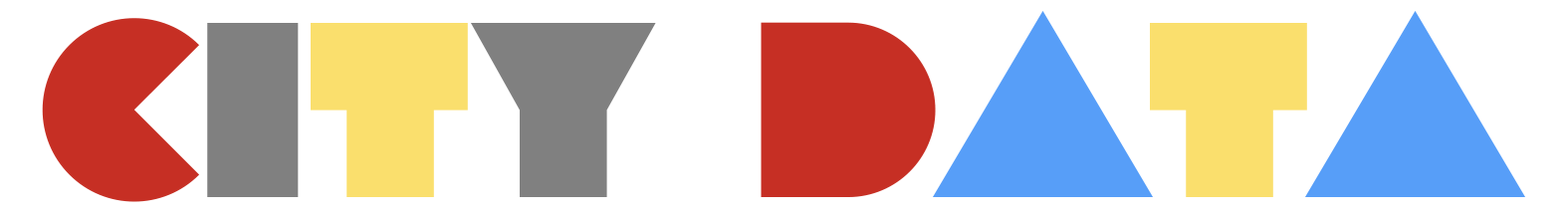
<style>
.page{position:relative;width:1568px;height:218px;background:#ffffff}
.page>*{position:absolute;margin:0}
.t1{font:248.9px "Lot";color:#c62f24}
.t2{font:248.9px "Lot";color:#808080}
.t3{font:248.9px "Lot";color:#fadf6d}
.t4{font:248.9px "Lot";color:#579ef8}
</style>
<div class="page">
<p class="t1" style="left:42px;top:11px;width:1483px;height:191px">c<span class="t2">i</span><span class="t3">t</span><span class="t2">y </span>d<span class="t4">a</span><span class="t3">t</span><span class="t4">a</span></p>
</div>
